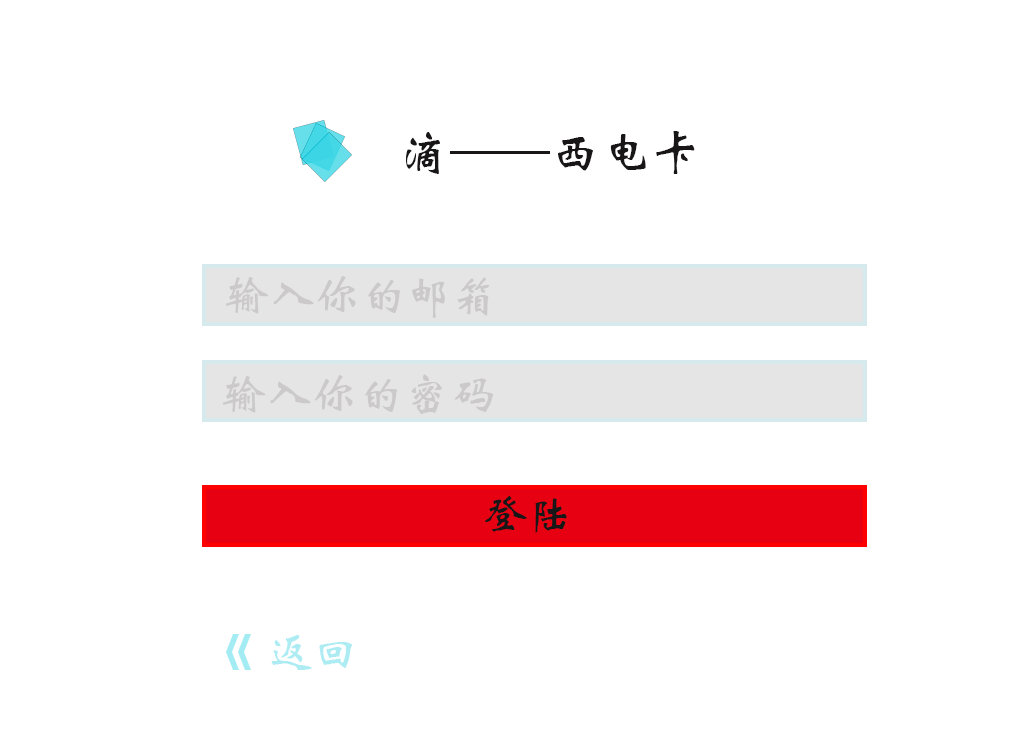
<style>
.page{position:relative;width:1024px;height:746px;background:#ffffff}
.page>*{position:absolute;margin:0}
.t1{font:50px "STXinwei";color:#181616}
.t2{font:45.8px "STXinwei";color:#b8b5b5}
.t3{font:45.8px "STXinwei";color:#181616}
.t4{font:45.8px "STXinwei";color:#aeecf3}
</style>
<div class="page">
<p class="t1" style="left:406px;top:131px;width:289px;height:43px">滴——西电卡</p>
<p class="t2" style="left:226px;top:276px;width:264px;height:42px;opacity:0.6">输入你的邮箱</p>
<p class="t2" style="left:223px;top:374px;width:271px;height:40px;opacity:0.6">输入你的密码</p>
<p class="t3" style="left:484px;top:496px;width:83px;height:37px">登陆</p>
<p class="t4" style="left:271px;top:634px;width:82px;height:36px">返回</p>
</div>
